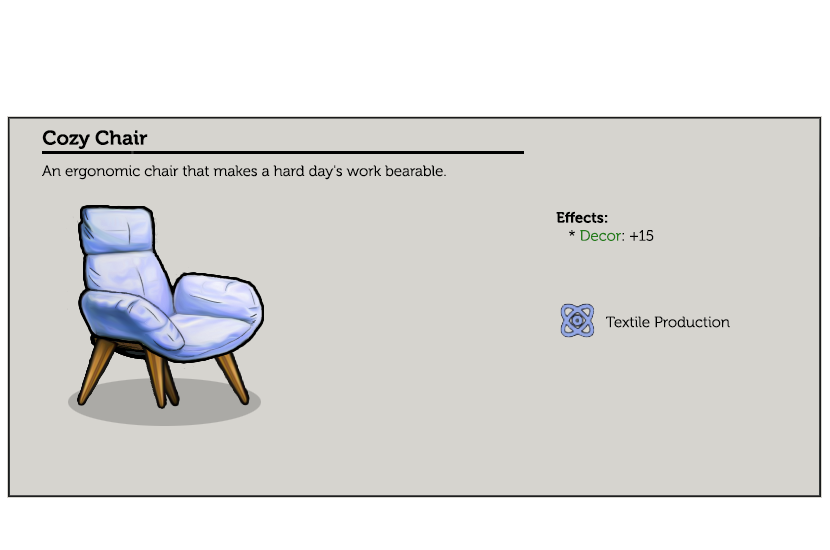
<style>
.page{position:relative;width:830px;height:550px;background:#d6d4cf}
.page>*{position:absolute;margin:0}
.t1{font:20px "Museo-700";color:#000000}
.t2{font:15px "Museo-300";color:#000000}
.t3{font:15px "Museo-700";color:#000000}
.t4{font:15px "Museo-300";color:#247d1a}
.t5{font:15px "Museo-300";color:#020202}
</style>
<div class="page">
<p class="t1" style="left:42px;top:130px;width:106px;height:19px">Cozy Chair</p>
<p class="t2" style="left:42px;top:165px;width:404px;height:15px">An ergonomic chair that makes a hard day's work bearable.</p>
<p class="t3" style="left:556px;top:211px;width:98px;height:30px">Effects:<br><span class="t2">   * </span><span class="t4">Decor</span><span class="t2">: +15</span></p>
<p class="t5" style="left:606px;top:316px;width:124px;height:12px">Textile Production</p>
</div>
